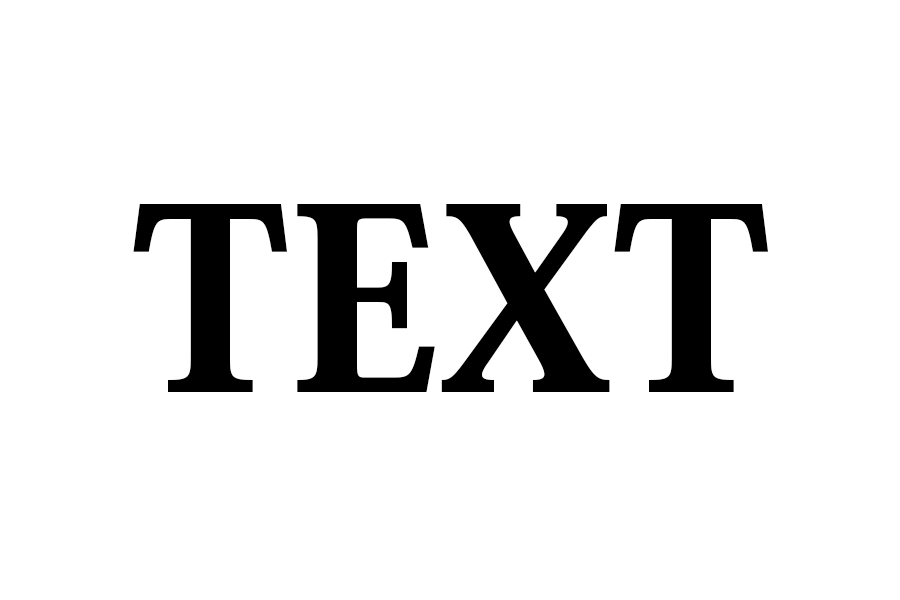
<style>
.page{position:relative;width:900px;height:600px;background:#ffffff}
.page>*{position:absolute;margin:0}
.t1{font:250px "KozMinPr6N-Heavy";color:#000000}
</style>
<div class="page">
<p class="t1" style="left:133px;top:204px;width:635px;height:188px">TEXT</p>
</div>
